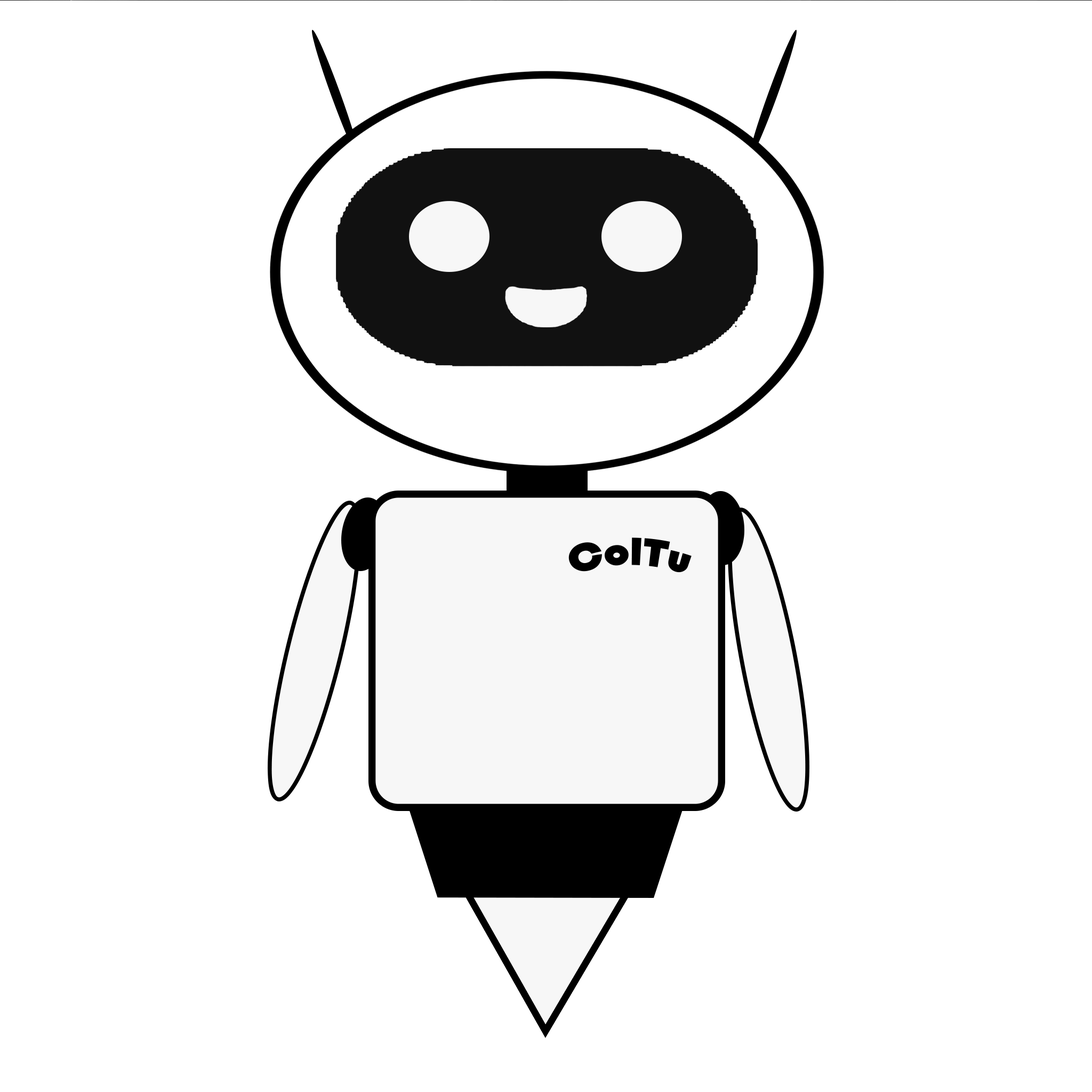
<style>
.page{position:relative;width:1092px;height:1092px;background:#ffffff}
.page>*{position:absolute;margin:0}
.t1{font:40.5px "Bauhaus93";color:#000000}
</style>
<div class="page">
<p class="t1" style="left:568px;top:537px;width:124px;height:35px">ColTu</p>
</div>
